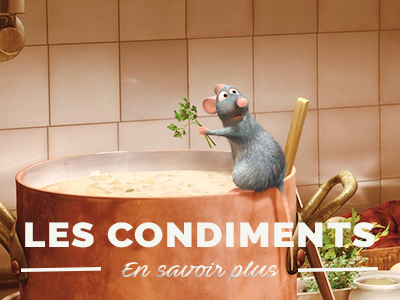
<style>
.page{position:relative;width:400px;height:300px}
.page>*{position:absolute;margin:0}
.t1{font:34.5px "Raleway-Black";letter-spacing:0.04em;color:#f5f6f0;scale:1.11 1}
.t2{font:20.7px "AveBetwanPERSONALUSEONLY";letter-spacing:0.04em;color:#f5f6f0;scale:1.11 1}
</style>
<div class="page">
<p class="t1" style="left:25px;top:222px;width:350px;height:26px">LES CONDIMENTS</p>
<p class="t2" style="left:121px;top:261px;width:158px;height:20px">En savoir plus</p>
</div>
